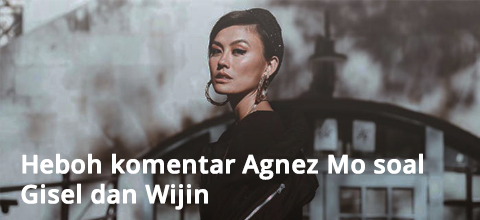
<style>
.page{position:relative;width:480px;height:220px}
.page>*{position:absolute;margin:0}
.t1{font:25px "OpenSans-Semibold";color:#ffffff;font-weight:bold}
</style>
<div class="page">
<p class="t1" style="left:21px;top:153px;width:402px;height:57px;text-align:right">Heboh komentar Agnez Mo soal<br>Gisel dan Wijin</p>
</div>
